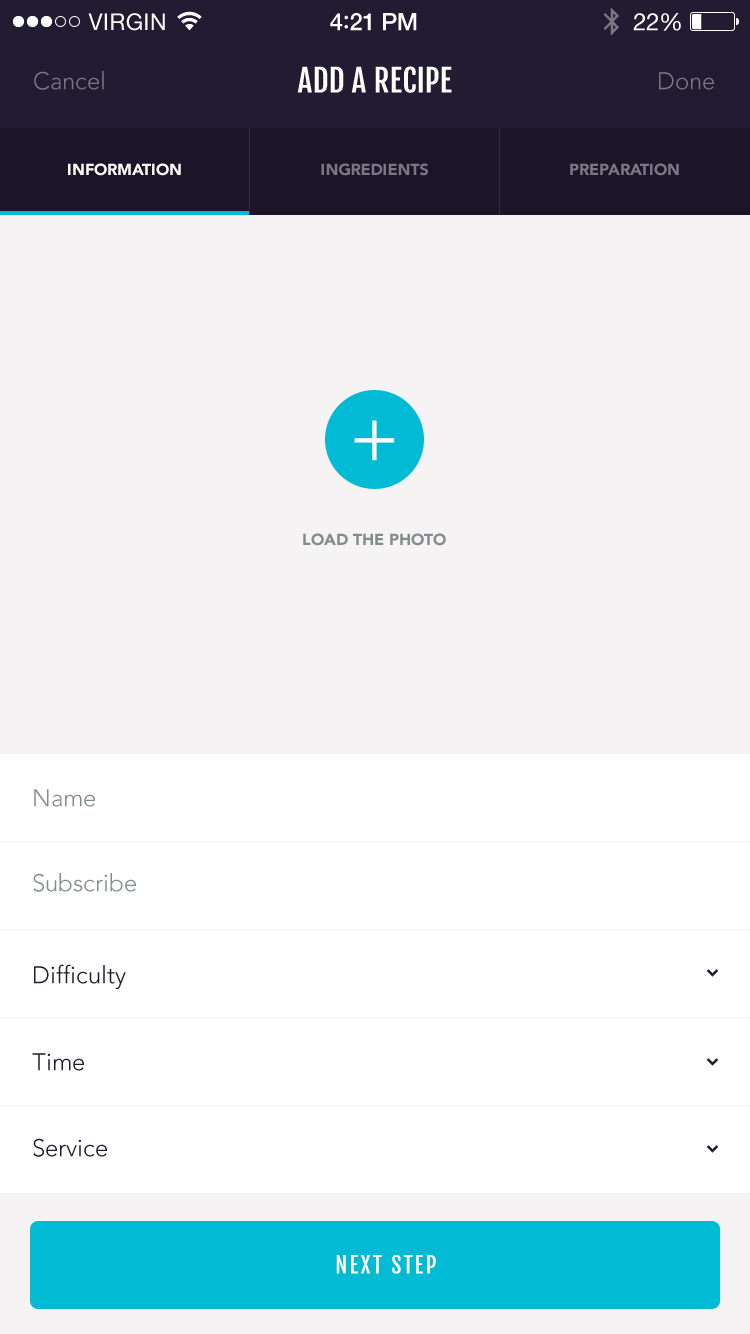
<style>
.page{position:relative;width:750px;height:1334px;background:#f5f3f3}
.page>*{position:absolute;margin:0}
.t1{font:24px "Avenir-Light";color:#797784}
.t2{font:31px "FjallaOne-Regular";color:#ffffff}
.t3{font:16px "Avenir-Black";color:#ffffff}
.t4{font:16px "Avenir-Black";color:#797784}
.t5{font:16px "Avenir-Black";color:#838c8c}
.t6{font:24px "Avenir-Light";color:#838c8c}
.t7{font:24px "Avenir-Light";color:#211b32}
.t8{font:22px "FjallaOne-Regular";letter-spacing:0.1em;color:#ffffff}
</style>
<div class="page">
<p class="t1" style="left:34px;top:71px;width:70px;height:19px">Cancel</p>
<p class="t2" style="left:297px;top:66px;width:155px;height:27px">ADD A RECIPE</p>
<p class="t1" style="left:659px;top:72px;width:55px;height:18px">Done</p>
<p class="t3" style="left:68px;top:163px;width:113px;height:13px">INFORMATION</p>
<p class="t4" style="left:321px;top:163px;width:107px;height:13px">INGREDIENTS</p>
<p class="t4" style="left:570px;top:163px;width:109px;height:13px">PREPARATION</p>
<p class="t5" style="left:303px;top:533px;width:143px;height:13px">LOAD THE PHOTO</p>
<p class="t6" style="left:34px;top:789px;width:61px;height:18px">Name</p>
<p class="t6" style="left:33px;top:873px;width:103px;height:19px">Subscribe</p>
<p class="t7" style="left:34px;top:964px;width:92px;height:25px">Difficulty</p>
<p class="t7" style="left:32px;top:1053px;width:52px;height:18px">Time</p>
<p class="t7" style="left:33px;top:1138px;width:74px;height:19px">Service</p>
<p class="t8" style="left:336px;top:1254px;width:100px;height:20px">NEXT STEP</p>
</div>
